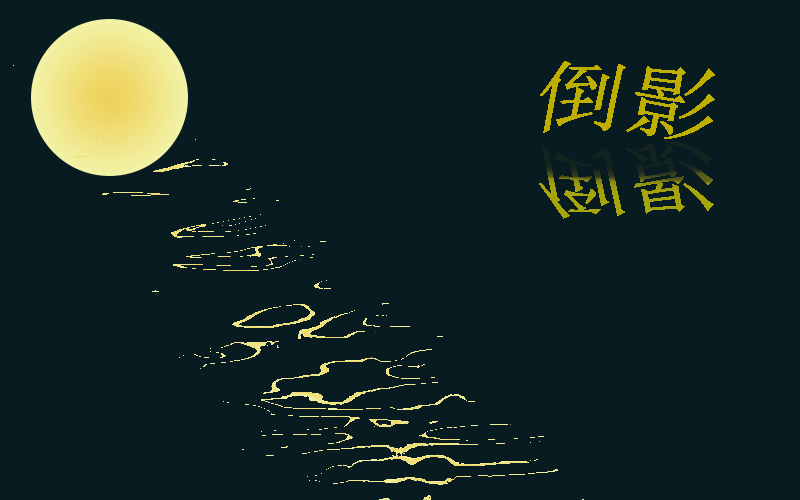
<style>
.page{position:relative;width:800px;height:500px;background:#071b20}
.page>*{position:absolute;margin:0}
.t1{font:79px "SimSun";letter-spacing:0.05em;color:#beae00;font-style:italic;scale:1.13 1}
.t2{font:79.2px "SimSun";letter-spacing:0.05em;font-style:italic;scale:1.12 1}
</style>
<div class="page">
<p class="t1" style="left:540px;top:61px;width:175px;height:78px">倒影</p>
<p class="t2" style="left:539px;top:140px;width:175px;height:79px">倒影</p>
</div>
